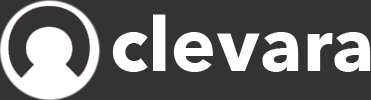
<style>
.page{position:relative;width:371px;height:100px;background:#333333}
.page>*{position:absolute;margin:0}
.t1{font:75px "AvenirNext-Bold";letter-spacing:0.01em;color:#ffffff}
</style>
<div class="page">
<p class="t1" style="left:112px;top:14px;width:259px;height:58px">clevara</p>
</div>
